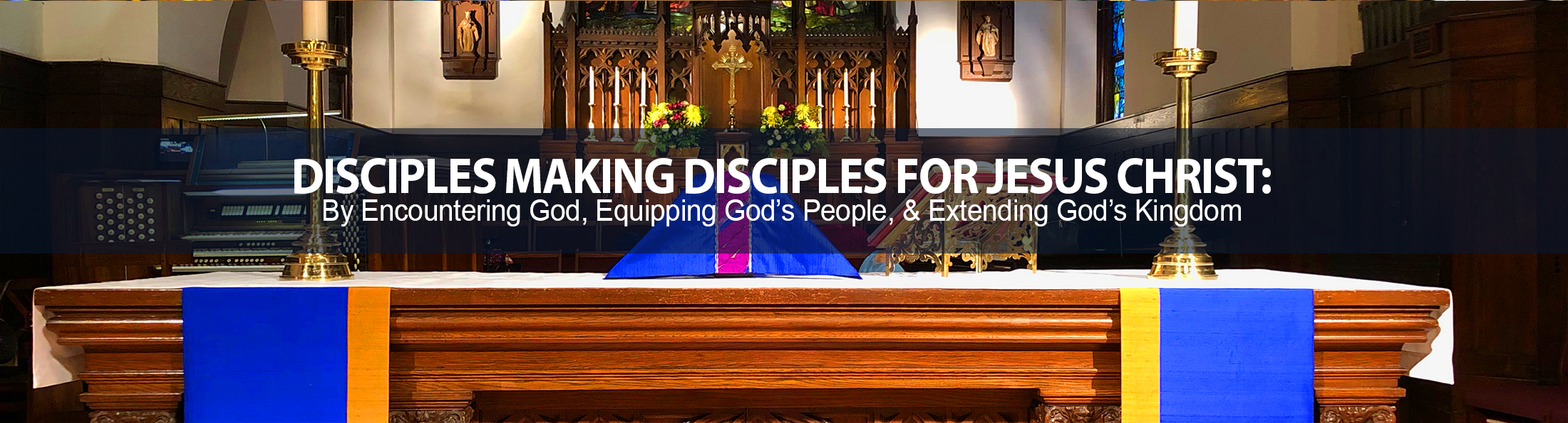
<style>
.page{position:relative;width:1568px;height:423px}
.page>*{position:absolute;margin:0}
.t1{font:30px/27.8px "ArialMT";letter-spacing:-0.01em;color:#ffffff;scale:0.93 1}
.t2{font:50.8px/27.8px "MyriadPro-Bold";letter-spacing:-0.025em;color:#ffffff;text-transform:uppercase;scale:0.93 1}
</style>
<div class="page">
<p class="t1" style="left:294px;top:158px;width:977px;height:69px;text-align:center"><span class="t2">Disciples making disciples for Jesus Christ:<br></span>By Encountering God, Equipping God’s People, &amp; Extending God’s Kingdom</p>
</div>
